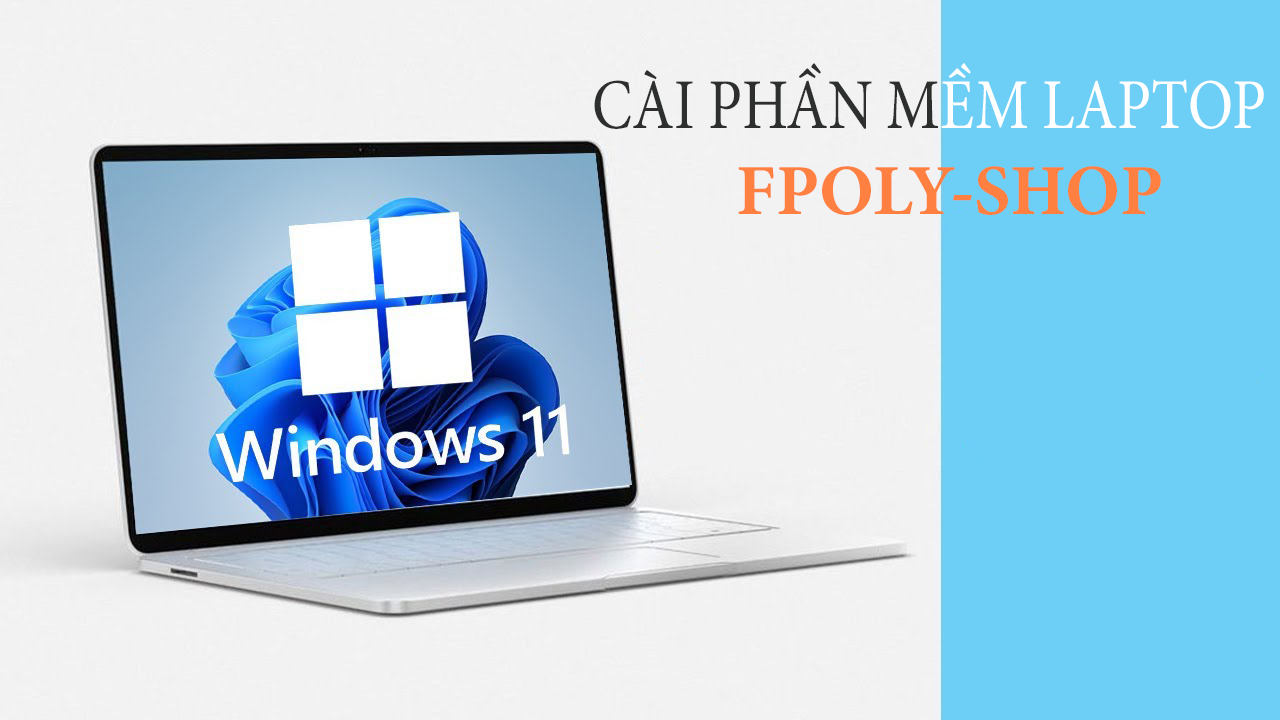
<style>
.page{position:relative;width:1280px;height:720px;background:#f2f2f2}
.page>*{position:absolute;margin:0}
.t1{font:71.7px "MinionPro-Regular";color:#2d2e2e;scale:0.84 1}
.t2{font:71.7px "MinionPro-Regular";color:#ffffff;scale:0.84 1}
.t3{font:72px "MinionPro-Bold";color:#ff8040}
</style>
<div class="page">
<p class="t1" style="left:594px;top:63px;width:670px;height:66px">CÀI PHẦN M<span class="t2">ỀM LAPTOP</span></p>
<p class="t3" style="left:738px;top:166px;width:423px;height:49px">FPOLY-SHOP</p>
</div>
